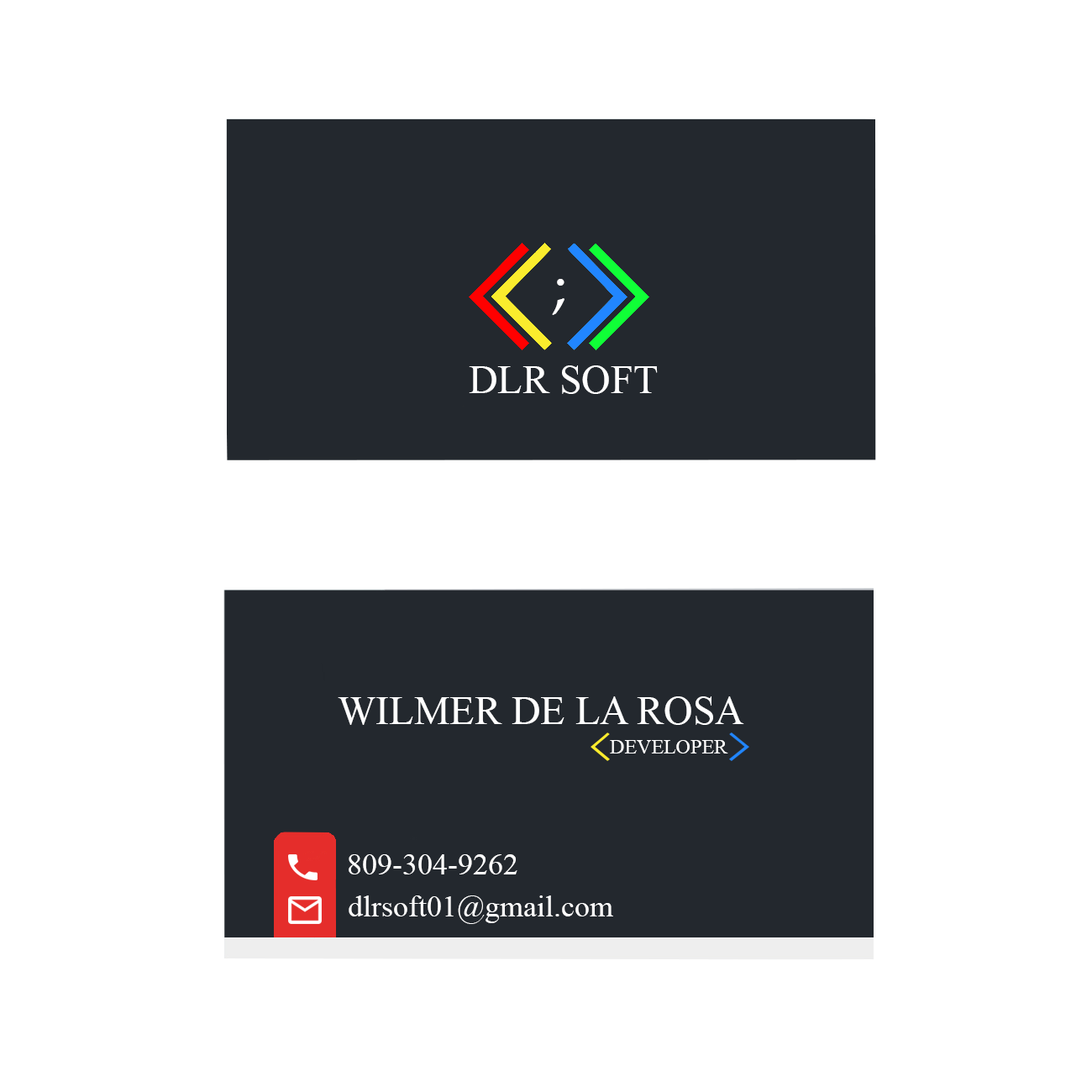
<style>
.page{position:relative;width:1092px;height:1092px;background:#ffffff}
.page>*{position:absolute;margin:0}
.t1{font:60.5px "BookAntiqua";color:#ffffff}
.t2{font:40.3px "TimesNewRomanPSMT";color:#ffffff}
.t3{font:20.2px "TimesNewRomanPSMT";color:#ffffff}
.t4{font:30.2px "TimesNewRomanPSMT";color:#ffffff}
</style>
<div class="page">
<p class="t1" style="left:552px;top:279px;width:12px;height:36px">;</p>
<p class="t2" style="left:469px;top:365px;width:189px;height:29px">DLR SOFT</p>
<p class="t2" style="left:338px;top:696px;width:406px;height:29px">WILMER DE LA ROSA</p>
<p class="t3" style="left:610px;top:740px;width:118px;height:13px">DEVELOPER</p>
<p class="t4" style="left:349px;top:854px;width:168px;height:20px">809-304-9262</p>
<p class="t4" style="left:349px;top:895px;width:264px;height:29px">dlrsoft01@gmail.com</p>
</div>
